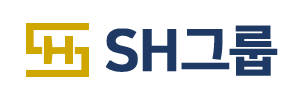
<style>
.page{position:relative;width:300px;height:100px;background:#ffffff}
.page>*{position:absolute;margin:0}
.t1{font:57.5px "NanumSquareEB";letter-spacing:-0.05em;color:#1e3963;font-weight:bold}
.t2{font:54.2px "NanumSquareEB";letter-spacing:-0.05em;color:#1e3963;font-weight:bold}
</style>
<div class="page">
<p class="t1" style="left:106px;top:28px;width:71px;height:44px">SH</p>
<p class="t2" style="left:181px;top:25px;width:97px;height:51px">그룹</p>
</div>
